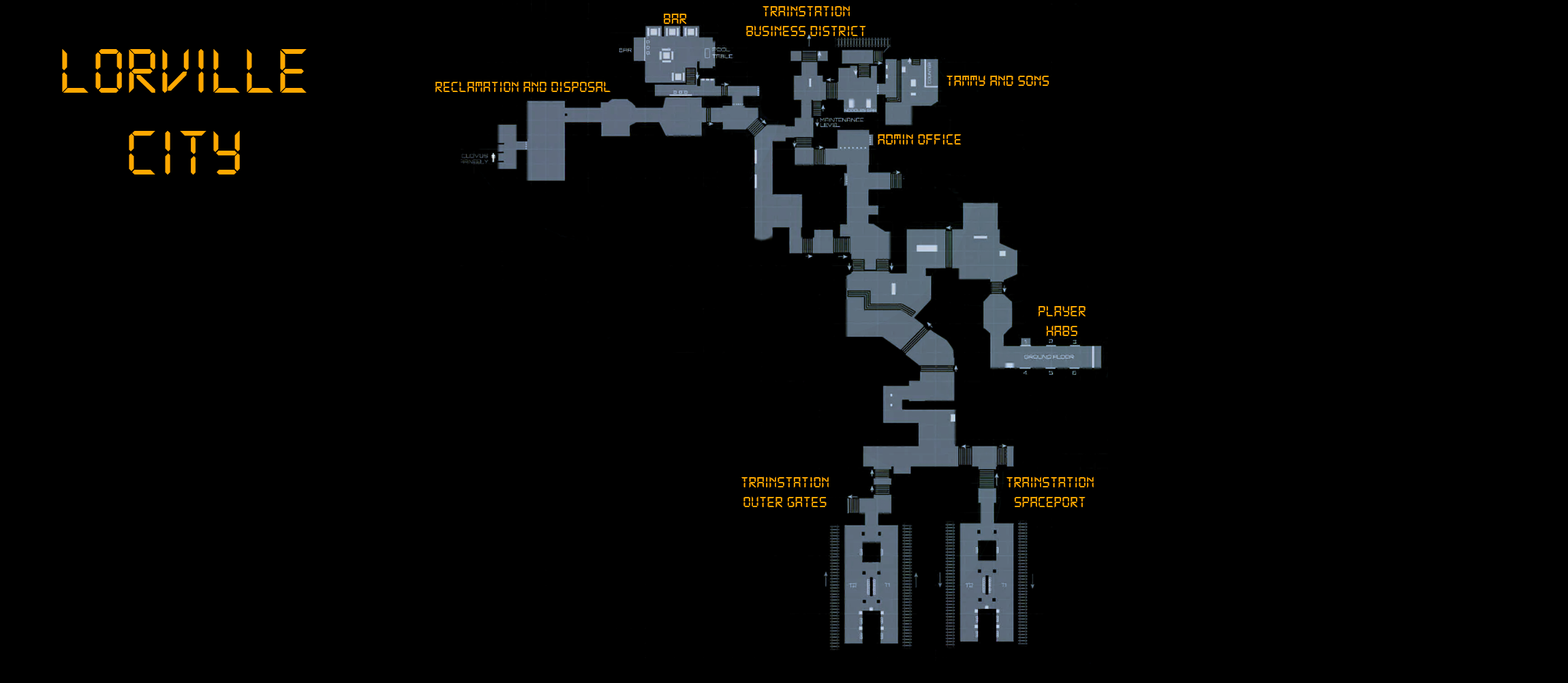
<style>
.page{position:relative;width:1568px;height:683px;background:#000000}
.page>*{position:absolute;margin:0}
.t1{font:16.4px "Jericho-Digital";color:#ffa800}
.t2{font:68.1px "Jericho-Digital";color:#ffa800}
</style>
<div class="page">
<p class="t1" style="left:746px;top:5px;width:120px;height:32px;text-align:center">TRAINSTaTION BUSINESS DISTRICT</p>
<p class="t1" style="left:664px;top:13px;width:23px;height:12px">BAR</p>
<p class="t2" style="left:62px;top:49px;width:245px;height:126px;text-align:center">LORVILLE <br>CITY</p>
<p class="t1" style="left:947px;top:75px;width:102px;height:12px">TAMmy and sONS</p>
<p class="t1" style="left:435px;top:81px;width:176px;height:12px">RECLAMATION AND DISPOSAL</p>
<p class="t1" style="left:878px;top:134px;width:84px;height:11px">adMIN OFFICE</p>
<p class="t1" style="left:1039px;top:305px;width:47px;height:32px;text-align:center">PLAyEr HABS</p>
<p class="t1" style="left:741px;top:476px;width:88px;height:32px;text-align:center">TRAINSTaTION OUTER GATES</p>
<p class="t1" style="left:1006px;top:476px;width:88px;height:32px;text-align:center">TRAINSTaTION SPACEPORT</p>
</div>
